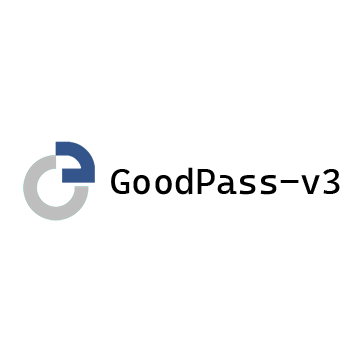
<style>
.page{position:relative;width:360px;height:360px;background:#ffffff}
.page>*{position:absolute;margin:0}
.t1{font:36px "CascadiaCode-Roman";color:#000000}
</style>
<div class="page">
<p class="t1" style="left:111px;top:167px;width:229px;height:28px">GoodPass-v3</p>
</div>
